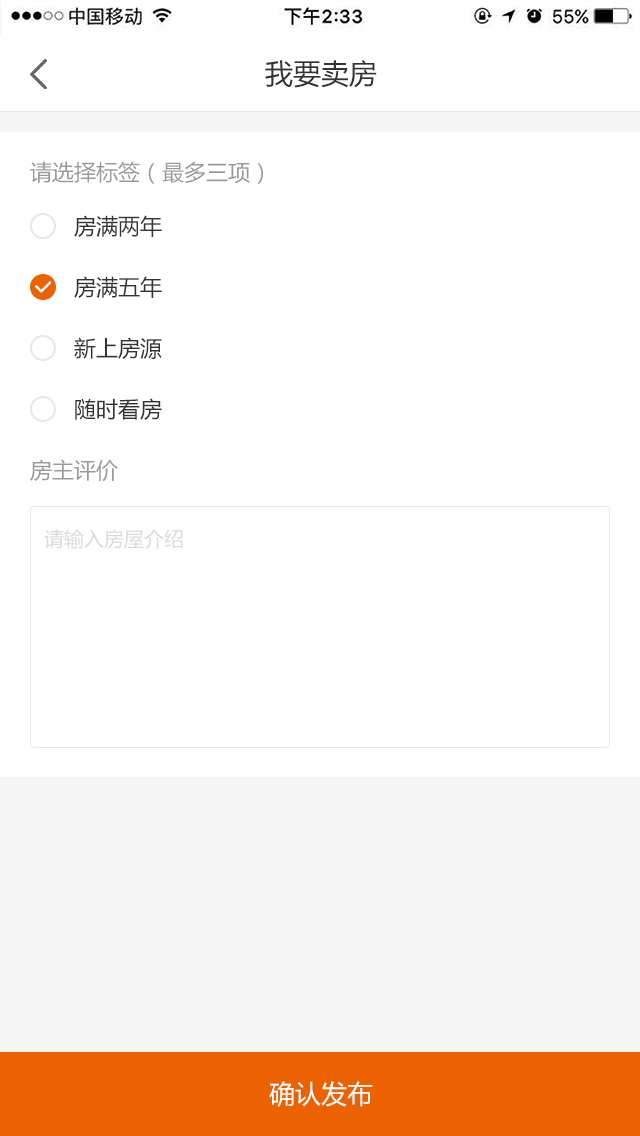
<style>
.page{position:relative;width:640px;height:1136px;background:#ffffff}
.page>*{position:absolute;margin:0}
.t1{font:28px "MicrosoftYaHei";color:#333333}
.t2{font:22px "MicrosoftYaHei";color:#999999}
.t3{font:22px "MicrosoftYaHei";color:#333333}
.t4{font:20px "MicrosoftYaHei";color:#dadada}
.t5{font:26px "MicrosoftYaHei";color:#ffffff}
</style>
<div class="page">
<p class="t1" style="left:265px;top:60px;width:112px;height:28px">我要卖房</p>
<p class="t2" style="left:30px;top:161px;width:233px;height:23px">请选择标签（最多三项）</p>
<p class="t3" style="left:74px;top:215px;width:88px;height:22px">房满两年</p>
<p class="t3" style="left:74px;top:276px;width:88px;height:22px">房满五年</p>
<p class="t3" style="left:74px;top:337px;width:88px;height:22px">新上房源</p>
<p class="t3" style="left:75px;top:398px;width:87px;height:22px">随时看房</p>
<p class="t2" style="left:30px;top:459px;width:88px;height:23px">房主评价</p>
<p class="t4" style="left:44px;top:529px;width:139px;height:20px">请输入房屋介绍</p>
<p class="t5" style="left:269px;top:1081px;width:104px;height:26px">确认发布</p>
</div>
